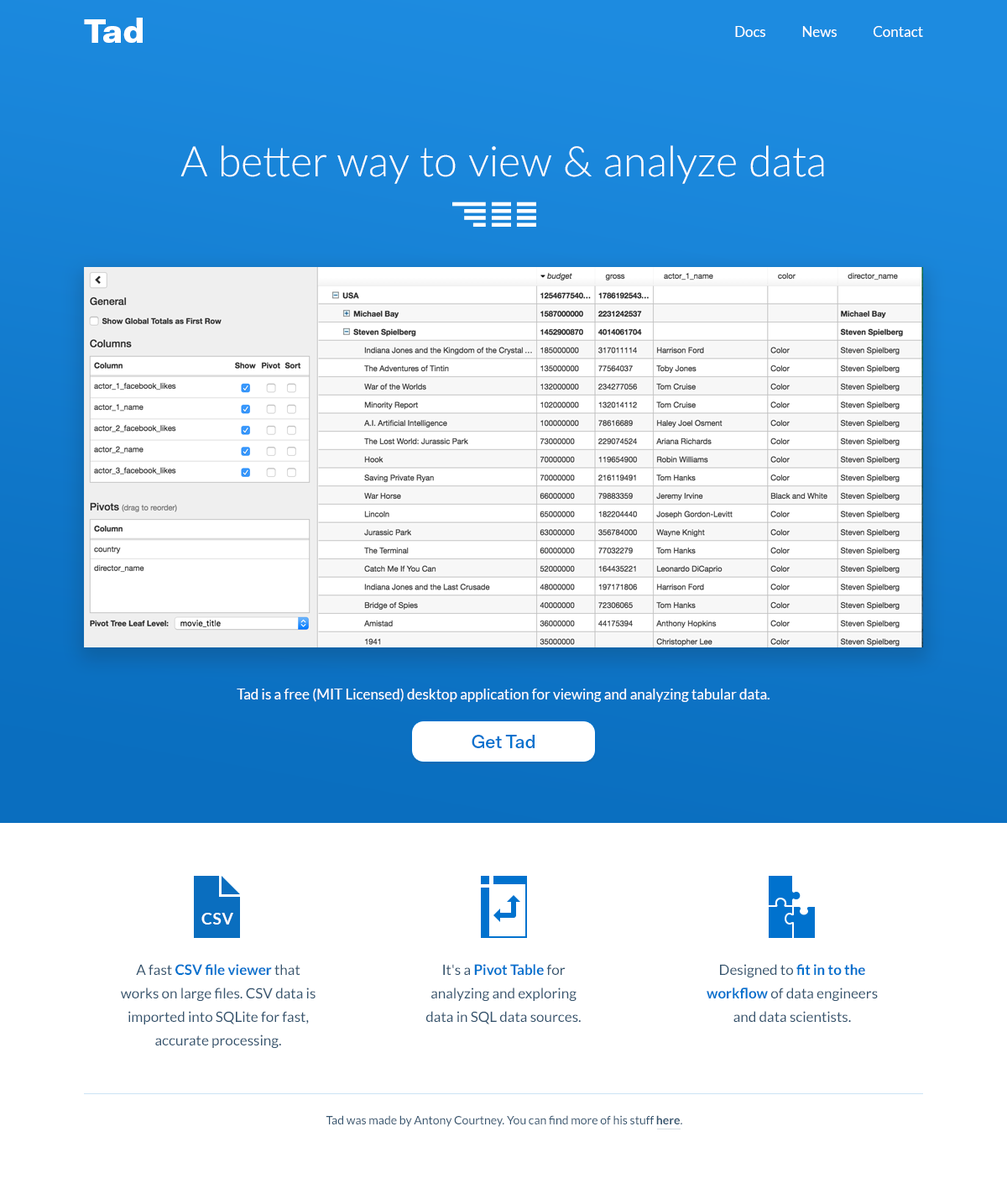
<style>
.page{position:relative;width:1007px;height:1184px;background:#ffffff}
.page>*{position:absolute;margin:0}
.t1{font:33.8px "FaktPro-Black";color:#ffffff}
.t2{font:14.3px "Lato-Regular";color:#ffffff}
.t3{font:42px "Lato-Light";color:#ffffff}
.t4{font:18.5px "FaktPro-Medium";color:#0072ce}
.t5{font:16px "Lato-Bold";letter-spacing:0.04em;color:#ffffff}
.t6{font:14.3px/23.5px "Lato-Regular";color:#35556f}
.t7{font:14.3px/23.5px "Lato-Bold";color:#0072ce}
.t8{font:11.8px "Lato-Regular";color:#35556f}
.t9{font:11.8px "Lato-Bold";color:#35556f}
</style>
<div class="page">
<p class="t1" style="left:84px;top:18px;width:59px;height:25px">Tad</p>
<p class="t2" style="left:735px;top:26px;width:188px;height:11px">Docs             News             Contact</p>
<p class="t3" style="left:180px;top:145px;width:644px;height:39px">A better way to view &amp; analyze data</p>
<p class="t2" style="left:237px;top:688px;width:533px;height:14px">Tad is a free (MIT Licensed) desktop application for viewing and analyzing tabular data.</p>
<p class="t4" style="left:472px;top:735px;width:63px;height:13px">Get Tad</p>
<p class="t5" style="left:201px;top:913px;width:32px;height:11px">CSV</p>
<p class="t6" style="left:121px;top:964px;width:195px;height:84px;text-align:center">A fast <span class="t7">CSV file viewer</span> that works on large files. CSV data is imported into SQLite for fast, accurate processing.</p>
<p class="t6" style="left:426px;top:964px;width:155px;height:60px;text-align:center">It's a <span class="t7">Pivot Table</span> for analyzing and exploring data in SQL data sources.</p>
<p class="t6" style="left:707px;top:964px;width:171px;height:58px;text-align:center">Designed to <span class="t7">fit in to the workflow</span> of data engineers and data scientists.</p>
<p class="t8" style="left:326px;top:1115px;width:357px;height:12px">Tad was made by Antony Courtney. You can find more of his stuff <span class="t9">here</span>.</p>
</div>
